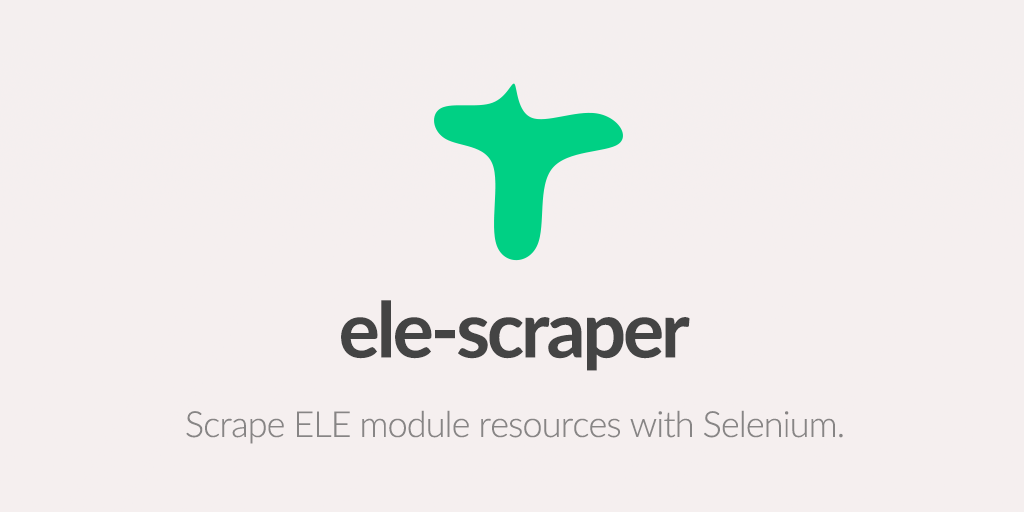
<style>
.page{position:relative;width:1024px;height:512px;background:#f5efef}
.page>*{position:absolute;margin:0}
.t1{font:76.9px "Lato-Bold";letter-spacing:-0.04em;color:#444444}
.t2{font:36px "Lato-Light";letter-spacing:-0.025em;color:#878585}
</style>
<div class="page">
<p class="t1" style="left:341px;top:300px;width:349px;height:71px">ele-scraper</p>
<p class="t2" style="left:186px;top:410px;width:657px;height:34px">Scrape ELE module resources with Selenium.</p>
</div>
